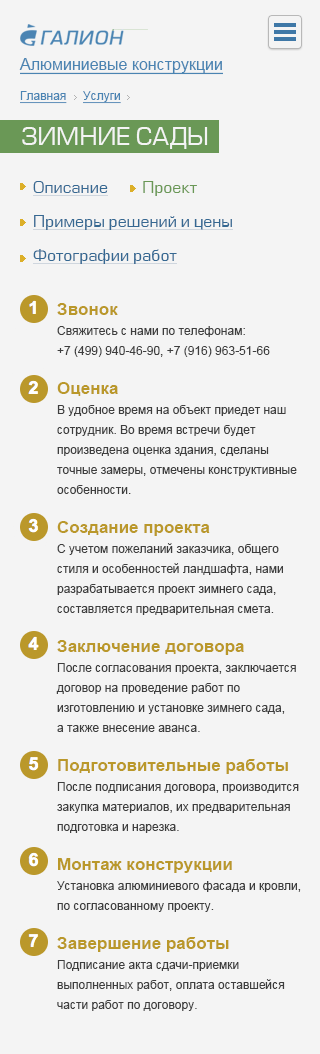
<style>
.page{position:relative;width:320px;height:1054px;background:#f4f4f4}
.page>*{position:absolute;margin:0}
.t1{font:16px "ArialMT";color:#4a84b2;text-decoration:underline}
.t2{font:12px "ArialMT";color:#4a84b3;text-decoration:underline}
.t3{font:24px "EuropeNormal";color:#f4f4f4;text-transform:uppercase}
.t4{font:16px/34px "EuropeNormal";color:#356892;text-decoration:underline}
.t5{font:16px/34px "EuropeNormal";color:#6a9856}
.t6{font:12px/20px "ArialMT";color:#3e3e3e}
.t7{font:17px/39px "Arial-BoldMT";color:#ba982a}
</style>
<div class="page">
<p class="t1" style="left:19px;top:58px;width:204px;height:17px">Алюминиевые конструкции</p>
<p class="t2" style="left:20px;top:91px;width:101px;height:13px">Главная     Услуги</p>
<p class="t3" style="left:22px;top:127px;width:186px;height:22px">ЗИМНИЕ САДЫ</p>
<p class="t4" style="left:33px;top:181px;width:200px;height:83px">Описание         <span class="t5">Проект<br></span>Примеры решений и цены<br>Фотографии работ</p>
<p class="t6" style="left:56px;top:303px;width:245px;height:708px"><span class="t7">Звонок<br></span>Свяжитесь с нами по телефонам: <br>+7 (499) 940-46-90, +7 (916) 963-51-66<br><span class="t7">Оценка<br></span>В удобное время на объект приедет наш <br>сотрудник. Во время встречи будет <br>произведена оценка здания, сделаны <br>точные замеры, отмечены конструктивные <br>особенности.<br><span class="t7">Создание проекта<br></span>С учетом пожеланий заказчика, общего <br>стиля и особенностей ландшафта, нами <br>разрабатывается проект зимнего сада,<br>составляется предварительная смета.<br><span class="t7">Заключение договора<br></span>После согласования проекта, заключается <br>договор на проведение работ по <br>изготовлению и установке зимнего сада, <br>а также внесение аванса.<br><span class="t7">Подготовительные работы<br></span>После подписания договора, производится <br>закупка материалов, их предварительная <br>подготовка и нарезка.<br><span class="t7">Монтаж конструкции<br></span>Установка алюминиевого фасада и кровли, <br>по согласованному проекту.<br><span class="t7">Завершение работы<br></span>Подписание акта сдачи-приемки <br>выполненных работ, оплата оставшейся <br>части работ по договору.</p>
</div>
